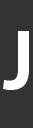
<style>
.page{position:relative;width:33px;height:128px;background:#333333}
.page>*{position:absolute;margin:0}
.t1{font:75px "AdobeGothicStd-Bold";color:#ffffff}
</style>
<div class="page">
<p class="t1" style="left:3px;top:31px;width:26px;height:59px">J</p>
</div>
